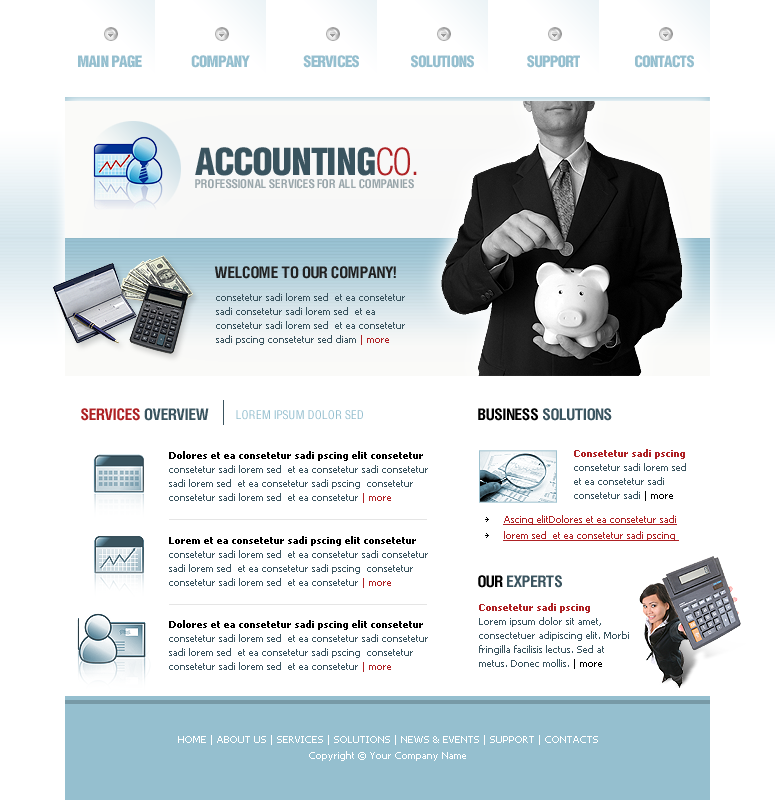
<style>
.page{position:relative;width:775px;height:800px;background:#ffffff}
.page>*{position:absolute;margin:0}
.t1{font:16px "HeliosCondBlack";letter-spacing:-0.04em;color:#95bfcf}
.t2{font:38px "HeliosCondBlack";letter-spacing:-0.04em;color:#3a545f}
.t3{font:38px "HeliosCondLight";letter-spacing:-0.04em;color:#ae2124}
.t4{font:12px "HeliosCond-Bold";color:#99a6ab}
.t5{font:16px "HeliosCond-Bold";color:#212121;text-transform:uppercase}
.t6{font:10px/14px "Tahoma";color:#3a545f}
.t7{font:10px/14px "Tahoma";color:#ae2124}
.t8{font:16px "HeliosCond-Bold";color:#ae2124;text-transform:uppercase}
.t9{font:16px "HeliosCond-Bold";color:#3a545f;text-transform:uppercase}
.t10{font:12px "HeliosCond";color:#95bfcf;text-transform:uppercase}
.t11{font:16px "HeliosCond-Bold";color:#000000;text-transform:uppercase}
.t12{font:10px/12px "Tahoma-Bold";color:#ae2124}
.t13{font:10px/14px "Tahoma";color:#000000}
.t14{font:10px/12px "Tahoma-Bold";color:#000000}
.t15{font:10px/16px "Tahoma";color:#ae2124;text-decoration:underline}
.t16{font:10px/16px "Tahoma";color:#ffffff}
</style>
<div class="page">
<p class="t1" style="left:78px;top:55px;width:64px;height:13px">MAIN PAGE</p>
<p class="t1" style="left:191px;top:55px;width:59px;height:13px">COMPANY</p>
<p class="t1" style="left:303px;top:55px;width:56px;height:13px">SERVICES</p>
<p class="t1" style="left:411px;top:55px;width:63px;height:13px">SOLUTIONS</p>
<p class="t1" style="left:527px;top:55px;width:53px;height:13px">SUPPORT</p>
<p class="t1" style="left:635px;top:55px;width:59px;height:13px">CONTACTS</p>
<p class="t2" style="left:195px;top:147px;width:222px;height:29px">ACCOUNTING<span class="t3">CO.</span></p>
<p class="t4" style="left:195px;top:179px;width:219px;height:10px">PROFESSIONAL SERVICES FOR ALL COMPANIES</p>
<p class="t5" style="left:214px;top:266px;width:182px;height:13px">welcome to our company!</p>
<p class="t6" style="left:216px;top:293px;width:189px;height:52px">consetetur sadi lorem sed  et ea consetetur sadi consetetur sadi lorem sed  et ea  consetetur sadi lorem sed  et ea consetetur sadi pscing consetetur sed diam <span class="t7">| more</span></p>
<p class="t8" style="left:81px;top:408px;width:128px;height:13px">SERVICES <span class="t9">OVERVIEW</span></p>
<p class="t10" style="left:236px;top:410px;width:127px;height:10px">LOREM IPSUM DOLOR SED</p>
<p class="t9" style="left:478px;top:408px;width:134px;height:13px"><span class="t11">BUSINESS </span>SOLUTIONS</p>
<p class="t6" style="left:574px;top:449px;width:112px;height:52px"><span class="t12">Consetetur sadi pscing <br></span>consetetur sadi lorem sed  et ea consetetur sadi consetetur sadi <span class="t13">| more</span></p>
<p class="t6" style="left:169px;top:451px;width:259px;height:52px"><span class="t14">Dolores et ea consetetur sadi pscing elit consetetur<br></span>consetetur sadi lorem sed  et ea consetetur sadi consetetur sadi lorem sed  et ea consetetur sadi pscing  consetetur consetetur sadi lorem sed  et ea consetetur<span class="t7"> | more</span></p>
<p class="t15" style="left:503px;top:515px;width:176px;height:26px">Ascing elitDolores et ea consetetur sadi lorem sed  et ea consetetur sadi pscing</p>
<p class="t6" style="left:169px;top:536px;width:259px;height:52px"><span class="t14">Lorem et ea consetetur sadi pscing elit consetetur<br></span>consetetur sadi lorem sed  et ea consetetur sadi consetetur sadi lorem sed  et ea consetetur sadi pscing  consetetur consetetur sadi lorem sed  et ea consetetur<span class="t7"> | more</span></p>
<p class="t9" style="left:478px;top:575px;width:84px;height:13px"><span class="t11">OUR </span>EXPERTS</p>
<p class="t6" style="left:479px;top:603px;width:150px;height:66px"><span class="t12">Consetetur sadi pscing <br></span>Lorem ipsum dolor sit amet, consectetuer adipiscing elit. Morbi fringilla facilisis lectus. Sed at metus. Donec mollis. <span class="t13">| more</span></p>
<p class="t6" style="left:169px;top:620px;width:259px;height:52px"><span class="t14">Dolores et ea consetetur sadi pscing elit consetetur<br></span>consetetur sadi lorem sed  et ea consetetur sadi consetetur sadi lorem sed  et ea consetetur sadi pscing  consetetur consetetur sadi lorem sed  et ea consetetur<span class="t7"> | more</span></p>
<p class="t16" style="left:178px;top:735px;width:420px;height:26px;text-align:center">HOME | ABOUT US | SERVICES | SOLUTIONS | NEWS &amp; EVENTS | SUPPORT | CONTACTS<br>Copyright © Your Company Name</p>
</div>
